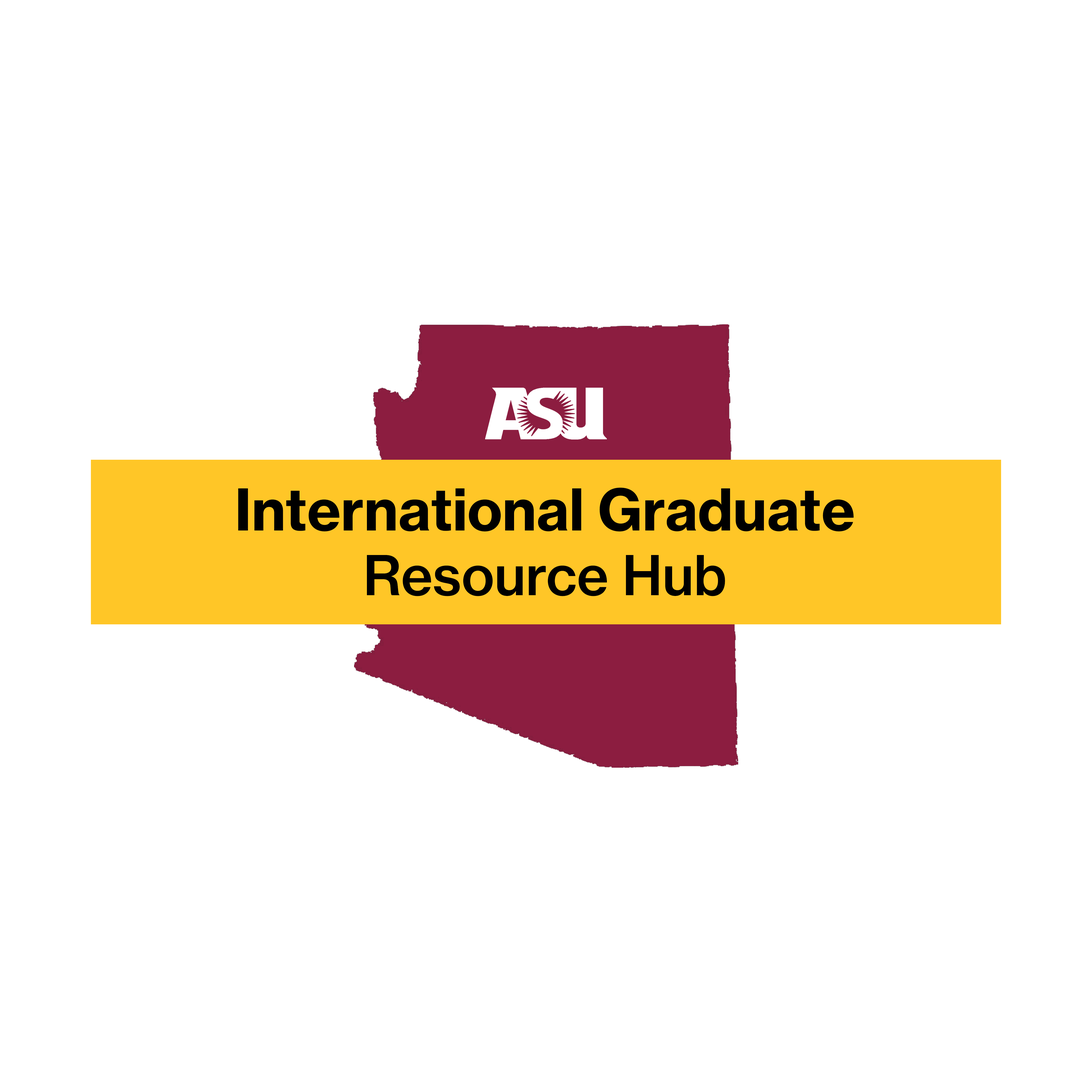
<style>
.page{position:relative;width:1092px;height:1092px;background:#ffffff}
.page>*{position:absolute;margin:0}
.t1{font:56.5px "NHaasGroteskTXPro-75Bd";color:#000000}
.t2{font:53.9px "NHaasGroteskTXPro-65Md";color:#000000}
</style>
<div class="page">
<p class="t1" style="left:238px;top:488px;width:616px;height:108px;text-align:center">International Graduate<br><span class="t2">Resource Hub</span></p>
</div>
